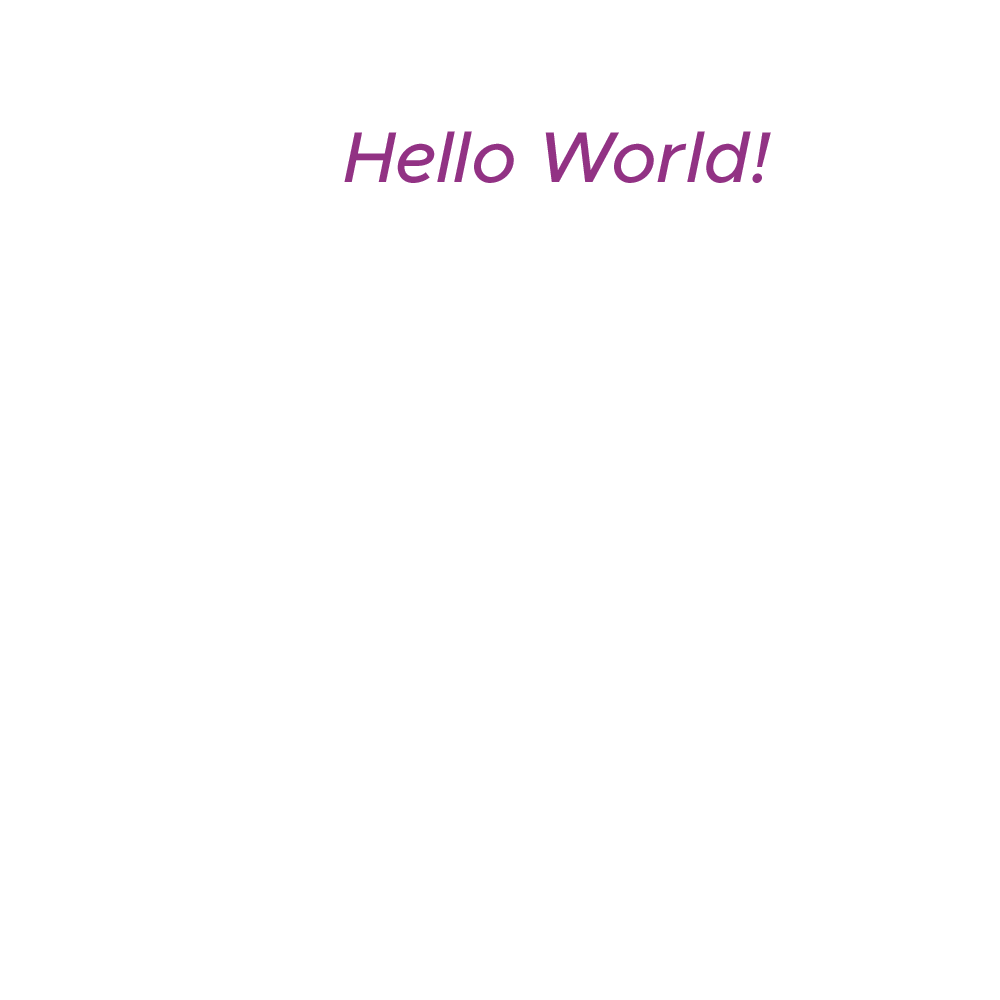
<style>
.page{position:relative;width:1000px;height:1000px;background:#ffffff}
.page>*{position:absolute;margin:0}
.t1{font:72px "Metropolis-MediumItalic";color:#923285}
</style>
<div class="page">
<p class="t1" style="left:344px;top:131px;width:427px;height:52px">Hello World!</p>
</div>
